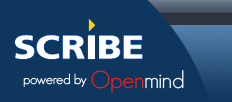
<style>
.page{position:relative;width:232px;height:102px;background:#0f365f}
.page>*{position:absolute;margin:0}
.t1{font:14px "GeosansLight";color:#ffffff}
.t2{font:24px "GeosansLight";color:#ed2123}
.t3{font:24px "GeosansLight";color:#ffffff}
</style>
<div class="page">
<p class="t1" style="left:23px;top:73px;width:64px;height:14px">powered by</p>
<p class="t2" style="left:91px;top:70px;width:93px;height:23px">Open<span class="t3">mind</span></p>
</div>
